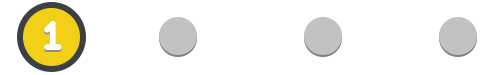
<style>
.page{position:relative;width:500px;height:75px;background:#ffffff}
.page>*{position:absolute;margin:0}
.t1{font:45.6px "GeometrySoftPro-BoldN";color:#ffffff}
</style>
<div class="page">
<p class="t1" style="left:44px;top:23px;width:18px;height:29px">1</p>
<p class="t1" style="left:44px;top:21px;width:18px;height:29px">1</p>
</div>
